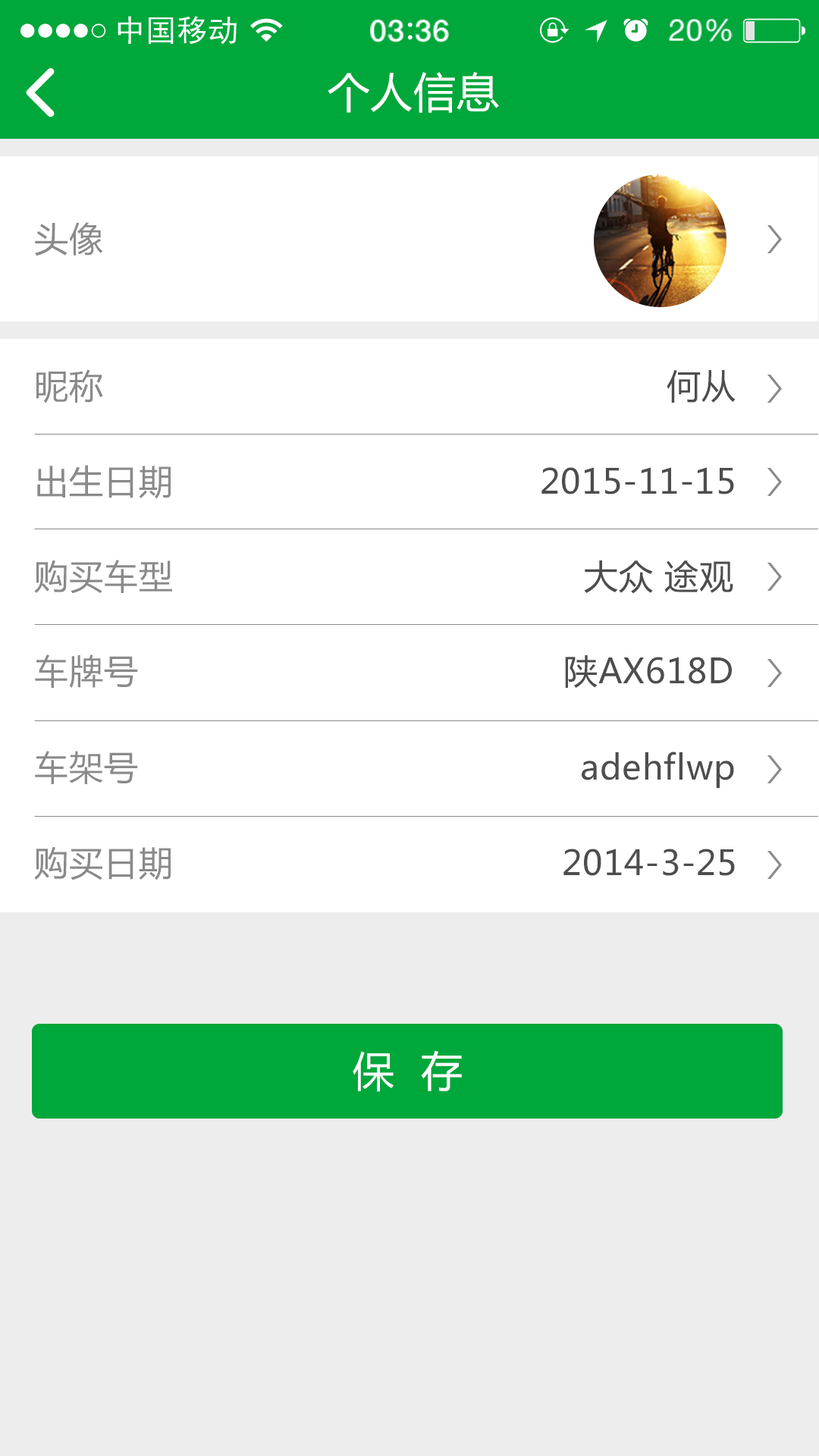
<style>
.page{position:relative;width:819px;height:1456px;background:#ffffff}
.page>*{position:absolute;margin:0}
.t1{font:41.7px "MicrosoftYaHei";letter-spacing:0.02em;color:#ffffff}
.t2{font:34.1px "MicrosoftYaHei";letter-spacing:0.02em;color:#8a8a8a}
.t3{font:34.1px "MicrosoftYaHei";letter-spacing:0.02em;color:#4d4d4d}
</style>
<div class="page">
<p class="t1" style="left:328px;top:72px;width:171px;height:41px">个人信息</p>
<p class="t2" style="left:35px;top:222px;width:68px;height:34px">头像</p>
<p class="t2" style="left:36px;top:369px;width:67px;height:34px">昵称</p>
<p class="t3" style="left:667px;top:369px;width:69px;height:34px">何从</p>
<p class="t2" style="left:37px;top:465px;width:134px;height:34px">出生日期</p>
<p class="t3" style="left:541px;top:467px;width:193px;height:27px">2015-11-15</p>
<p class="t2" style="left:34px;top:560px;width:138px;height:34px">购买车型</p>
<p class="t3" style="left:584px;top:560px;width:149px;height:34px">大众 途观</p>
<p class="t2" style="left:35px;top:654px;width:103px;height:34px">车牌号</p>
<p class="t3" style="left:565px;top:655px;width:167px;height:33px">陕AX618D</p>
<p class="t2" style="left:35px;top:751px;width:103px;height:33px">车架号</p>
<p class="t3" style="left:582px;top:751px;width:152px;height:38px">adehflwp</p>
<p class="t2" style="left:34px;top:846px;width:137px;height:34px">购买日期</p>
<p class="t3" style="left:563px;top:849px;width:172px;height:27px">2014-3-25</p>
<p class="t1" style="left:353px;top:1050px;width:109px;height:42px">保  存</p>
</div>
